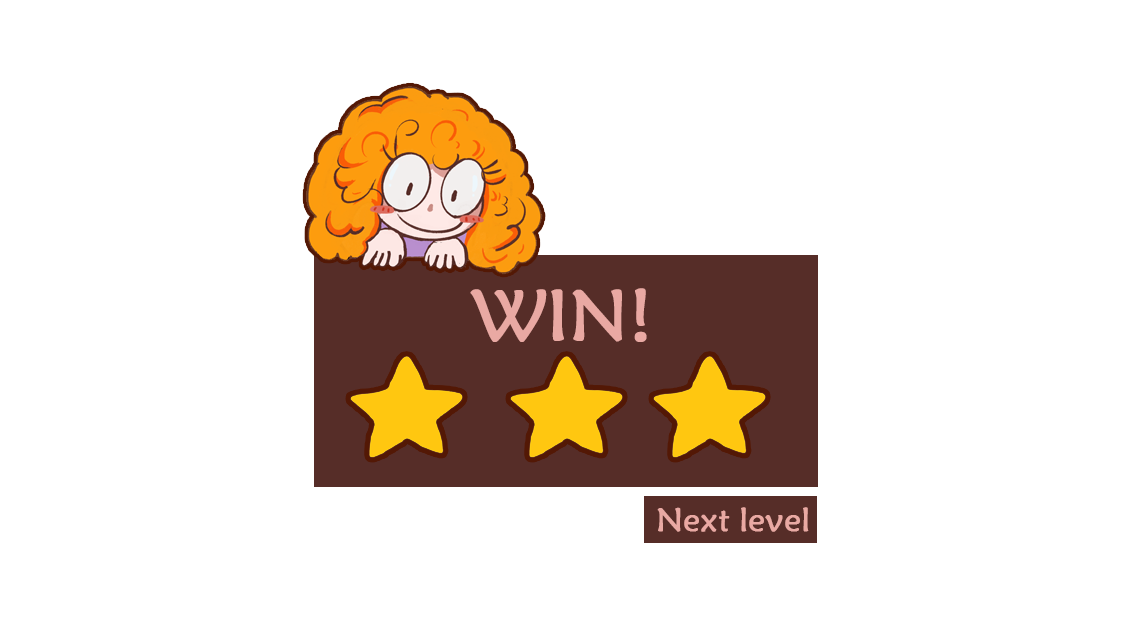
<style>
.page{position:relative;width:1128px;height:635px;background:#ffffff}
.page>*{position:absolute;margin:0}
.t1{font:72px "STXinwei";color:#e9a9a3;font-weight:bold}
.t2{font:32.9px "STXinwei";color:#e9a9a3;font-weight:bold}
</style>
<div class="page">
<p class="t1" style="left:470px;top:288px;width:177px;height:54px">WIN!</p>
<p class="t2" style="left:657px;top:507px;width:152px;height:25px">Next level</p>
</div>
